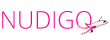
<style>
.page{position:relative;width:110px;height:40px;background:#ffffff}
.page>*{position:absolute;margin:0}
.t1{font:24px "OpenSans-Light";color:#ff0097}
</style>
<div class="page">
<p class="t1" style="left:2px;top:11px;width:90px;height:18px">NUDIGO</p>
</div>
